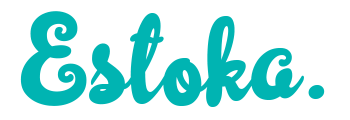
<style>
.page{position:relative;width:350px;height:120px;background:#ffffff}
.page>*{position:absolute;margin:0}
.t1{font:134.6px "SimplisickyFill";color:#00b4b2}
</style>
<div class="page">
<p class="t1" style="left:20px;top:11px;width:305px;height:96px">Estoka.</p>
</div>
